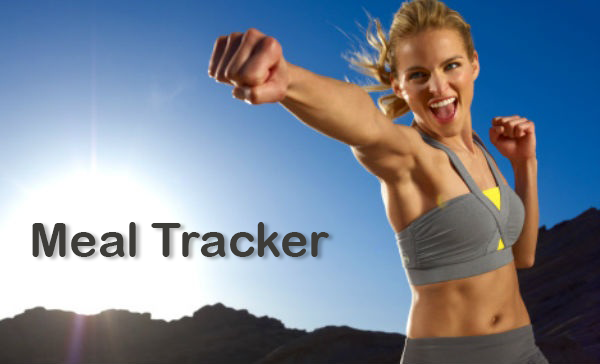
<style>
.page{position:relative;width:600px;height:364px}
.page>*{position:absolute;margin:0}
.t1{font:48px "ArialRoundedMTBold";color:#3d3c38}
</style>
<div class="page">
<p class="t1" style="left:32px;top:222px;width:297px;height:35px">Meal Tracker</p>
</div>
